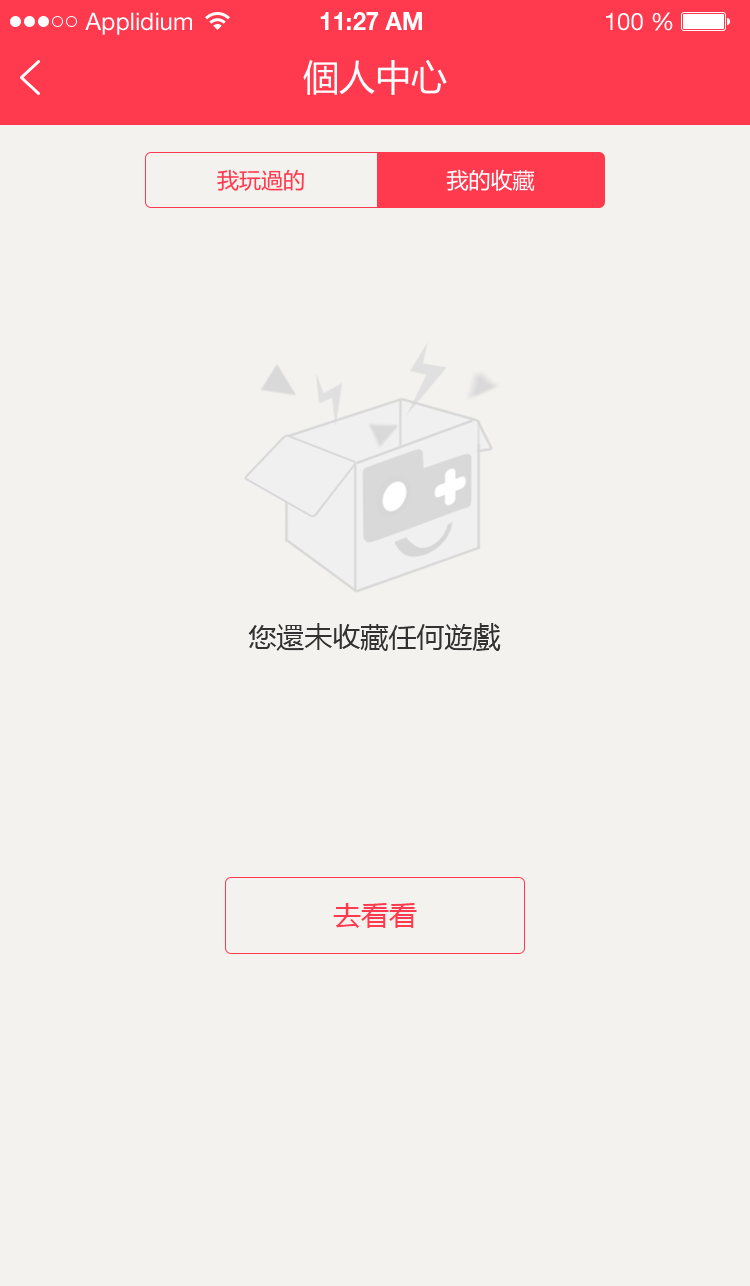
<style>
.page{position:relative;width:750px;height:1286px;background:#f3f2ee}
.page>*{position:absolute;margin:0}
.t1{font:24px "HelveticaNeueLTStd-Roman";color:#ffffff}
.t2{font:24px "HelveticaNeueLTStd-Bd";color:#ffffff}
.t3{font:36px "MicrosoftYaHei";color:#ffffff}
.t4{font:22px "MicrosoftYaHei";color:#ff3a4e}
.t5{font:22px "MicrosoftYaHei";color:#ffffff}
.t6{font:28px "MicrosoftYaHei";color:#323232}
.t7{font:28px "MicrosoftYaHei";color:#ff3a4e}
</style>
<div class="page">
<p class="t1" style="left:85px;top:12px;width:107px;height:23px">Applidium</p>
<p class="t2" style="left:320px;top:12px;width:102px;height:18px">11:27 AM</p>
<p class="t1" style="left:606px;top:12px;width:67px;height:19px">100 %</p>
<p class="t3" style="left:303px;top:59px;width:144px;height:36px">個人中心</p>
<p class="t4" style="left:217px;top:169px;width:87px;height:22px">我玩過的</p>
<p class="t5" style="left:446px;top:169px;width:89px;height:22px">我的收藏</p>
<p class="t6" style="left:248px;top:623px;width:253px;height:28px">您還未收藏任何遊戲</p>
<p class="t7" style="left:333px;top:903px;width:84px;height:25px">去看看</p>
</div>
